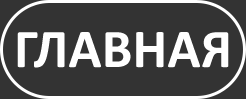
<style>
.page{position:relative;width:246px;height:99px;background:#333333}
.page>*{position:absolute;margin:0}
.t1{font:55px "Calibri-Bold";color:#ffffff}
</style>
<div class="page">
<p class="t1" style="left:17px;top:32px;width:212px;height:36px">ГЛАВНАЯ</p>
</div>
